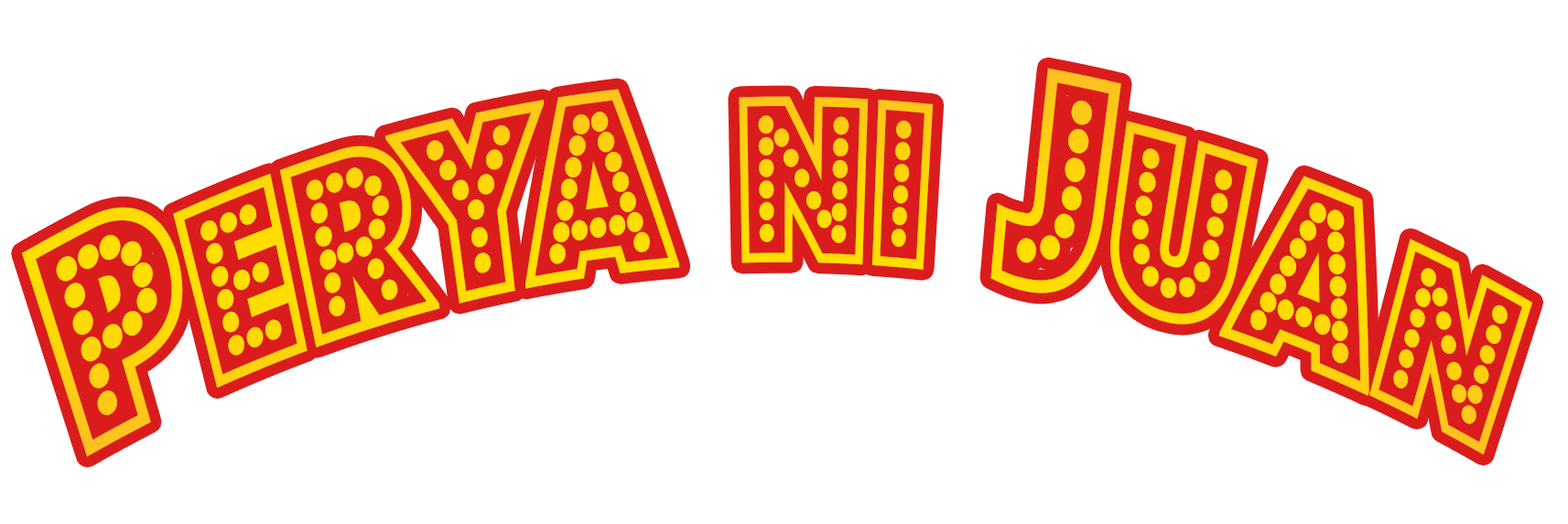
<style>
.page{position:relative;width:1568px;height:524px;background:#ffffff}
.page>*{position:absolute;margin:0}
.t1{font:258.5px "BudmoJigglish-Regular";color:#ffda05;scale:0.75 1}
.t2{font:311.5px "BudmoJigglish-Regular";color:#ffda05;scale:0.75 1}
.t3{font:233.6px "BudmoJigglish-Regular";color:#ffda05;scale:0.75 1}
</style>
<div class="page">
<p class="t1" style="left:22px;top:68px;width:1511px;height:390px"><span class="t2">P</span>erya <span class="t3">ni </span><span class="t2">J</span>ua<span class="t3">n</span></p>
</div>
